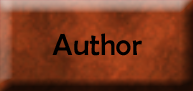
<style>
.page{position:relative;width:193px;height:91px}
.page>*{position:absolute;margin:0}
.t1{font:30.5px "BerlinSansFB-Reg";color:#000000}
</style>
<div class="page">
<p class="t1" style="left:52px;top:33px;width:90px;height:23px">Author</p>
</div>
